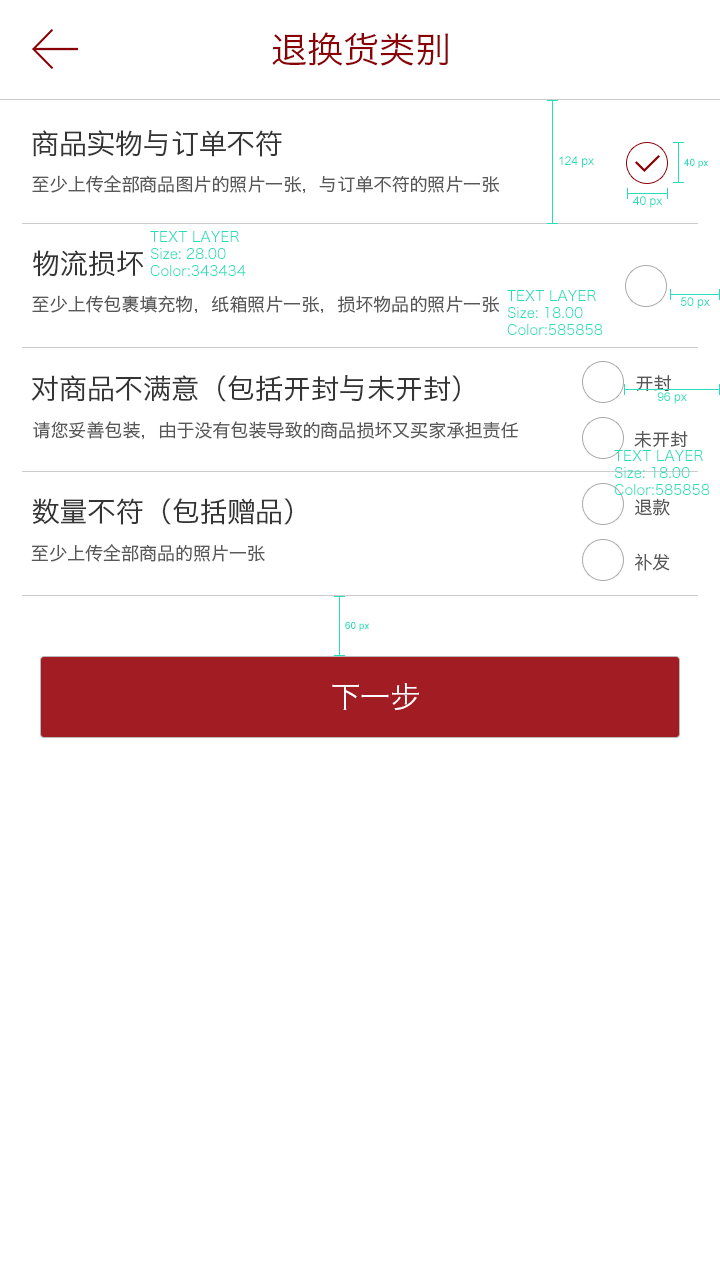
<style>
.page{position:relative;width:720px;height:1280px;background:#ffffff}
.page>*{position:absolute;margin:0}
.t1{font:36px "HiraginoSansGB-W3";color:#8a0105}
.t2{font:28px "HiraginoSansGB-W3";color:#343434}
.t3{font:12px "ArialMT";color:#28ddb9}
.t4{font:10px "ArialMT";color:#28ddb9}
.t5{font:18px "HiraginoSansGB-W3";color:#585858}
.t6{font:14px "HiraginoSansGB-W3";color:#28ddb9}
.t7{font:30px "HiraginoSansGB-W3";color:#ffffff}
</style>
<div class="page">
<p class="t1" style="left:272px;top:32px;width:176px;height:34px">退换货类别</p>
<p class="t2" style="left:32px;top:130px;width:250px;height:27px">商品实物与订单不符</p>
<p class="t3" style="left:559px;top:156px;width:35px;height:12px">124 px</p>
<p class="t4" style="left:684px;top:158px;width:24px;height:10px">40 px</p>
<p class="t5" style="left:32px;top:175px;width:468px;height:19px">至少上传全部商品图片的照片一张，与订单不符的照片一张</p>
<p class="t3" style="left:633px;top:196px;width:30px;height:12px">40 px</p>
<p class="t6" style="left:150px;top:231px;width:96px;height:45px">TEXT LAYER<br>Size: 28.00<br>Color:343434</p>
<p class="t2" style="left:33px;top:250px;width:111px;height:27px">物流损坏</p>
<p class="t6" style="left:507px;top:290px;width:96px;height:45px">TEXT LAYER<br>Size: 18.00<br>Color:585858</p>
<p class="t5" style="left:32px;top:295px;width:468px;height:19px">至少上传包裹填充物，纸箱照片一张，损坏物品的照片一张</p>
<p class="t3" style="left:680px;top:297px;width:30px;height:12px">50 px</p>
<p class="t2" style="left:31px;top:375px;width:429px;height:27px">对商品不满意（包括开封与未开封）</p>
<p class="t5" style="left:636px;top:375px;width:35px;height:16px">开封</p>
<p class="t3" style="left:657px;top:392px;width:30px;height:12px">96 px</p>
<p class="t5" style="left:33px;top:421px;width:486px;height:19px">请您妥善包装，由于没有包装导致的商品损坏又买家承担责任</p>
<p class="t5" style="left:634px;top:431px;width:54px;height:17px">未开封</p>
<p class="t6" style="left:614px;top:450px;width:96px;height:45px">TEXT LAYER<br>Size: 18.00<br>Color:585858</p>
<p class="t2" style="left:32px;top:498px;width:261px;height:27px">数量不符（包括赠品）</p>
<p class="t5" style="left:635px;top:498px;width:35px;height:18px">退款</p>
<p class="t5" style="left:31px;top:544px;width:234px;height:18px">至少上传全部商品的照片一张</p>
<p class="t5" style="left:634px;top:553px;width:36px;height:18px">补发</p>
<p class="t4" style="left:345px;top:621px;width:24px;height:10px">60 px</p>
<p class="t7" style="left:332px;top:683px;width:87px;height:28px">下一步</p>
</div>
